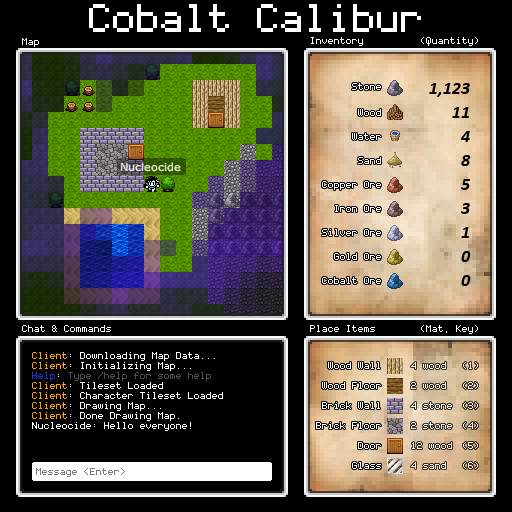
<style>
.page{position:relative;width:512px;height:512px;background:#000000}
.page>*{position:absolute;margin:0}
.t1{font:16px "Coder's-Crux";color:#ffffff}
.t2{font:18px/24px "Calibri-BoldItalic";color:#000000}
.t3{font:16px/10px "Coder's-Crux";color:#ffffff}
.t4{font:16px/10px "Coder's-Crux";color:#ffa200}
.t5{font:16px/10px "Coder's-Crux";color:#1137da}
.t6{font:16px/10px "Coder's-Crux";color:#515151}
.t7{font:16px/20px "Coder's-Crux";color:#ffffff}
.t8{font:16px/20px "Coder's-Crux";color:#f6efe7}
.t9{font:16px/20px "Coder's-Crux";color:#f4ece2}
.t10{font:16px "Coder's-Crux";color:#7a7a7a}
</style>
<div class="page">
<p class="t1" style="left:22px;top:38px;width:17px;height:9px">Map</p>
<p class="t1" style="left:311px;top:37px;width:52px;height:9px">Inventory</p>
<p class="t1" style="left:421px;top:37px;width:57px;height:9px">(Quantity)</p>
<p class="t1" style="left:352px;top:83px;width:29px;height:7px">Stone</p>
<p class="t2" style="left:429px;top:83px;width:42px;height:203px;text-align:right">1,123<br>11<br>4<br>8<br>5<br>3<br>1<br>0<br>0</p>
<p class="t1" style="left:358px;top:109px;width:23px;height:7px">Wood</p>
<p class="t1" style="left:352px;top:133px;width:29px;height:7px">Water</p>
<p class="t1" style="left:358px;top:157px;width:23px;height:7px">Sand</p>
<p class="t1" style="left:322px;top:181px;width:59px;height:9px">Copper Ore</p>
<p class="t1" style="left:335px;top:205px;width:46px;height:7px">Iron Ore</p>
<p class="t1" style="left:322px;top:229px;width:59px;height:7px">Silver Ore</p>
<p class="t1" style="left:334px;top:253px;width:47px;height:7px">Gold Ore</p>
<p class="t1" style="left:322px;top:277px;width:59px;height:7px">Cobalt Ore</p>
<p class="t1" style="left:22px;top:325px;width:89px;height:7px">Chat &amp; Commands</p>
<p class="t1" style="left:310px;top:325px;width:65px;height:7px">Place Items</p>
<p class="t1" style="left:421px;top:325px;width:57px;height:9px">(Mat, Key)</p>
<p class="t3" style="left:32px;top:352px;width:191px;height:79px"><span class="t4">Client</span>: Downloading Map Data...<br><span class="t4">Client</span>: Initializing Map...<br><span class="t5">Help</span>: <span class="t6">Type /help for some help<br></span><span class="t4">Client</span>: Tileset Loaded<br><span class="t4">Client</span>: Character Tileset Loaded<br><span class="t4">Client</span>: Drawing Map...<br><span class="t4">Client</span>: Done Drawing Map.<br>Nucleocide: Hello everyone!</p>
<p class="t7" style="left:316px;top:362px;width:65px;height:107px;text-align:right">Wood Wall<br>Wood Floor<br>Brick Wall<br>Brick Floor<br>Door<br>Glass</p>
<p class="t8" style="left:411px;top:362px;width:41px;height:107px">4 wood<br>2 wood<br>4 stone<br>2 stone<br>12 wood<br>4 sand</p>
<p class="t9" style="left:463px;top:362px;width:15px;height:107px;text-align:right">(1)<br>(2)<br>(3)<br>(4)<br>(5)<br>(6)</p>
<p class="t10" style="left:36px;top:468px;width:89px;height:9px">Message &lt;Enter&gt;</p>
</div>
